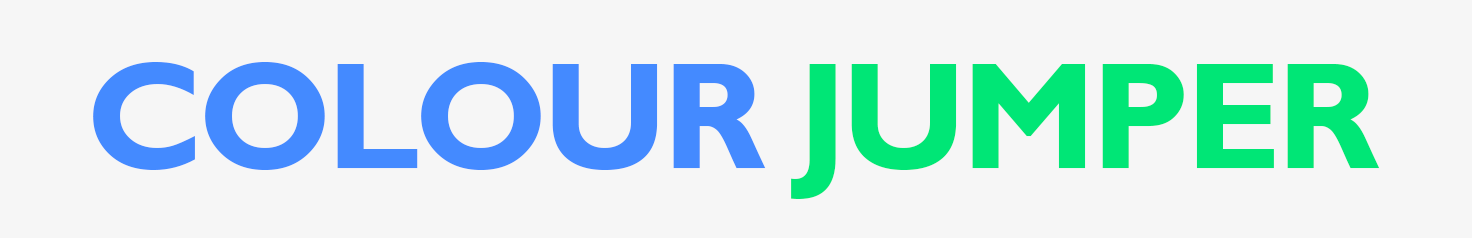
<style>
.page{position:relative;width:1472px;height:238px;background:#f6f6f6}
.page>*{position:absolute;margin:0}
.t1{font:153px "GillSansMT-Bold";letter-spacing:-0.039em;color:#448aff}
.t2{font:153px "GillSansMT-Bold";letter-spacing:-0.039em;color:#00e676}
</style>
<div class="page">
<p class="t1" style="left:93px;top:62px;width:1287px;height:137px">COLOUR <span class="t2">JUMPER</span></p>
</div>
